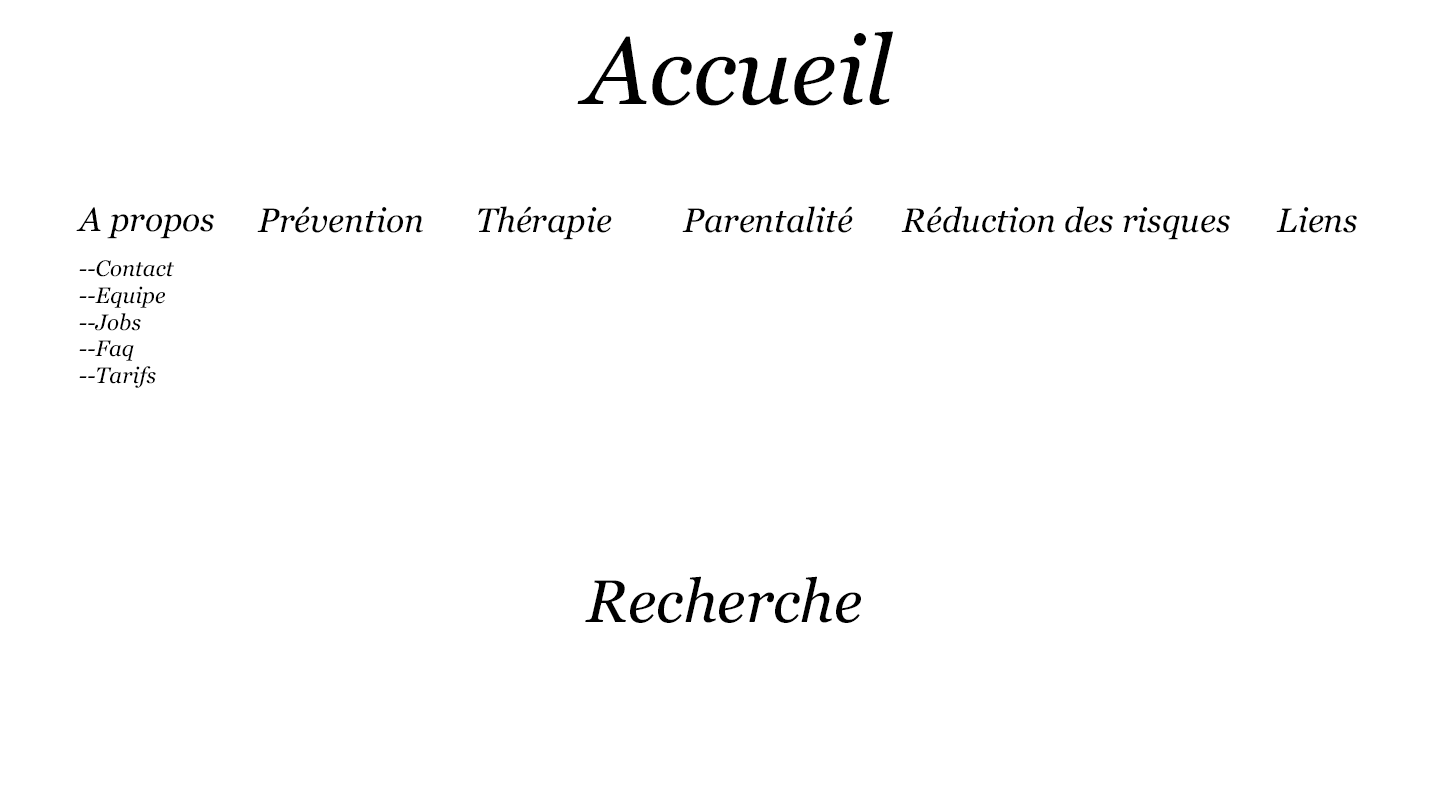
<style>
.page{position:relative;width:1440px;height:800px;background:#ffffff}
.page>*{position:absolute;margin:0}
.t1{font:96px "Georgia-Italic";color:#000000}
.t2{font:22.3px "Georgia-Italic";color:#000000}
.t3{font:33.6px/18.1px "Georgia-Italic";color:#000000}
.t4{font:33.6px "Georgia-Italic";color:#000000}
.t5{font:60px "Georgia-Italic";color:#000000}
</style>
<div class="page">
<p class="t1" style="left:577px;top:31px;width:316px;height:75px">Accueil</p>
<p class="t2" style="left:76px;top:207px;width:138px;height:181px"><span class="t3">A propos<br><br></span>--Contact<br>--Equipe<br>--Jobs<br>--Faq<br>--Tarifs</p>
<p class="t4" style="left:257px;top:206px;width:166px;height:27px">Prévention</p>
<p class="t4" style="left:478px;top:206px;width:134px;height:34px">Thérapie</p>
<p class="t4" style="left:682px;top:206px;width:171px;height:27px">Parentalité</p>
<p class="t4" style="left:901px;top:206px;width:329px;height:34px">Réduction des risques</p>
<p class="t4" style="left:1276px;top:207px;width:81px;height:26px">Liens</p>
<p class="t5" style="left:585px;top:576px;width:276px;height:47px">Recherche</p>
</div>
